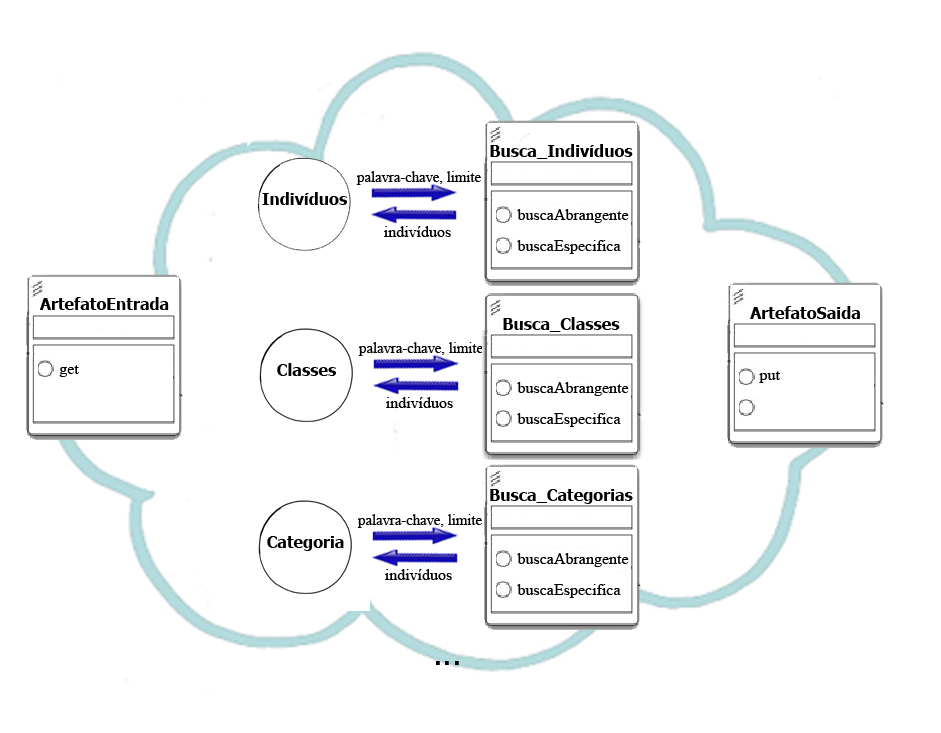
<style>
.page{position:relative;width:941px;height:733px;background:#ffffff}
.page>*{position:absolute;margin:0}
.t1{font:16px "Tahoma-Bold";color:#000000}
.t2{font:14.7px "TimesNewRomanPSMT";color:#000000}
.t3{font:16px "TimesNewRomanPSMT";color:#000000}
.t4{font:32px "Tahoma";color:#000000}
</style>
<div class="page">
<p class="t1" style="left:490px;top:144px;width:143px;height:15px">Busca_Indivíduos</p>
<p class="t2" style="left:356px;top:171px;width:125px;height:14px">palavra-chave, limite</p>
<p class="t1" style="left:262px;top:192px;width:85px;height:13px">Indivíduos</p>
<p class="t3" style="left:384px;top:226px;width:67px;height:11px">indivíduos</p>
<p class="t1" style="left:39px;top:297px;width:130px;height:13px">ArtefatoEntrada</p>
<p class="t1" style="left:503px;top:317px;width:117px;height:15px">Busca_Classes</p>
<p class="t1" style="left:750px;top:306px;width:110px;height:13px">ArtefatoSaida</p>
<p class="t2" style="left:358px;top:342px;width:125px;height:14px">palavra-chave, limite</p>
<p class="t3" style="left:59px;top:365px;width:20px;height:12px">get</p>
<p class="t1" style="left:277px;top:363px;width:59px;height:13px">Classes</p>
<p class="t3" style="left:759px;top:371px;width:21px;height:12px">put</p>
<p class="t3" style="left:386px;top:397px;width:67px;height:11px">indivíduos</p>
<p class="t1" style="left:490px;top:489px;width:143px;height:15px">Busca_Categorias</p>
<p class="t2" style="left:357px;top:514px;width:125px;height:14px">palavra-chave, limite</p>
<p class="t1" style="left:267px;top:536px;width:77px;height:15px">Categoria</p>
<p class="t3" style="left:385px;top:569px;width:67px;height:11px">indivíduos</p>
<p class="t4" style="left:436px;top:661px;width:23px;height:4px">...</p>
</div>
